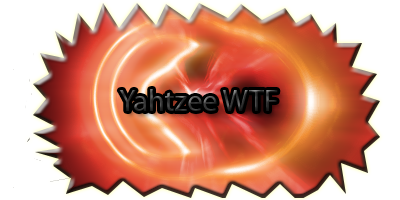
<style>
.page{position:relative;width:400px;height:200px;background:#ffffff}
.page>*{position:absolute;margin:0}
.t1{font:30px "MyriadPro-Regular"}
</style>
<div class="page">
<p class="t1" style="left:119px;top:89px;width:159px;height:22px">Yahtzee WTF</p>
</div>
